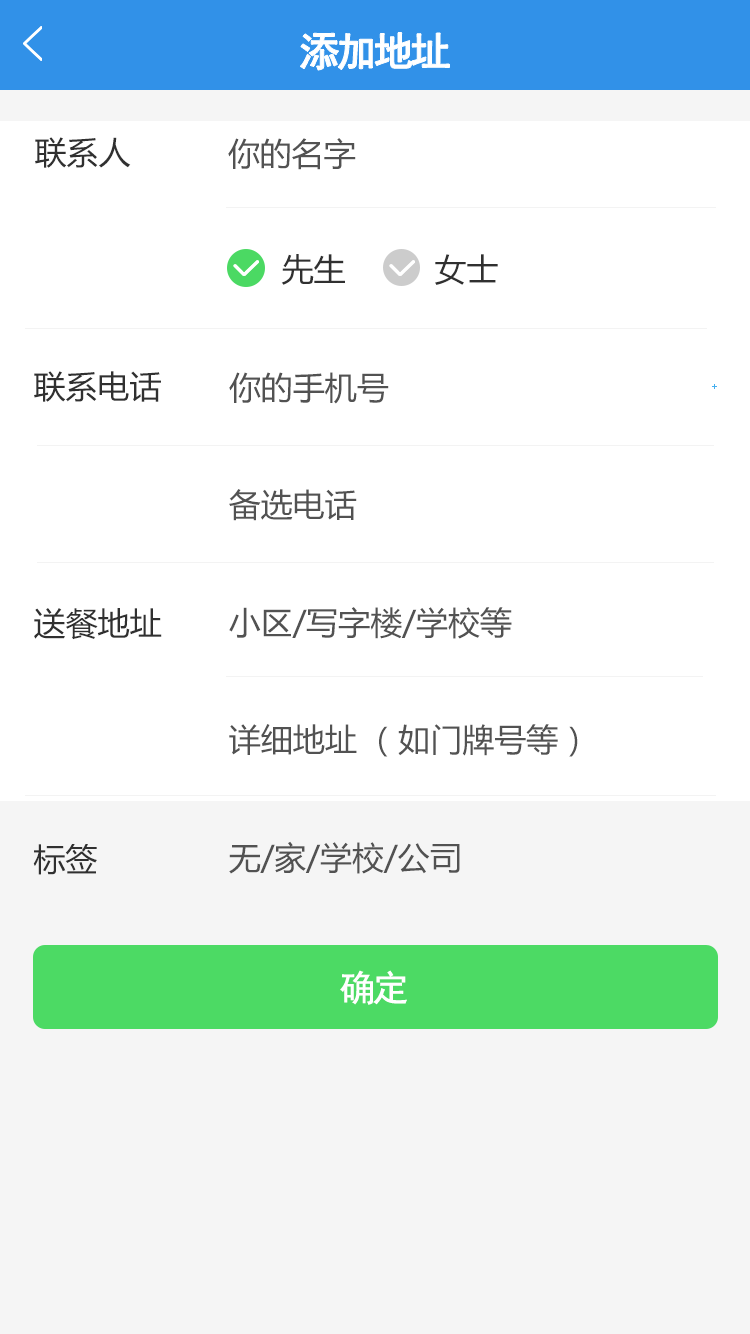
<style>
.page{position:relative;width:750px;height:1334px;background:#ffffff}
.page>*{position:absolute;margin:0}
.t1{font:40px "SimHei";letter-spacing:-0.1em;color:#ffffff;font-weight:bold}
.t2{font:32px "MicrosoftYaHei";color:#303030}
.t3{font:32px "MicrosoftYaHei";color:#525252}
.t4{font:36px "SimHei";letter-spacing:-0.1em;color:#ffffff;font-weight:bold}
</style>
<div class="page">
<p class="t1" style="left:300px;top:32px;width:150px;height:38px">添加地址</p>
<p class="t2" style="left:35px;top:137px;width:96px;height:31px">联系人</p>
<p class="t3" style="left:228px;top:138px;width:128px;height:32px">你的名字</p>
<p class="t2" style="left:281px;top:254px;width:64px;height:31px">先生</p>
<p class="t2" style="left:435px;top:254px;width:63px;height:31px">女士</p>
<p class="t2" style="left:34px;top:371px;width:127px;height:31px">联系电话</p>
<p class="t3" style="left:229px;top:372px;width:160px;height:32px">你的手机号</p>
<p class="t3" style="left:229px;top:489px;width:128px;height:32px">备选电话</p>
<p class="t2" style="left:34px;top:608px;width:128px;height:32px">送餐地址</p>
<p class="t3" style="left:229px;top:607px;width:283px;height:32px">小区/写字楼/学校等</p>
<p class="t3" style="left:229px;top:724px;width:349px;height:33px">详细地址 （如门牌号等）</p>
<p class="t2" style="left:33px;top:844px;width:64px;height:31px">标签</p>
<p class="t3" style="left:229px;top:841px;width:231px;height:33px">无/家/学校/公司</p>
<p class="t4" style="left:340px;top:970px;width:67px;height:35px">确定</p>
</div>
